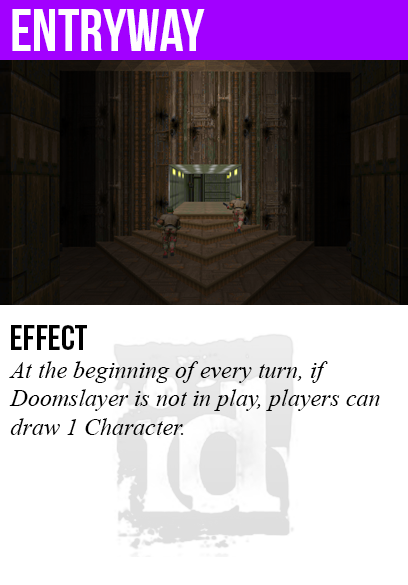
<style>
.page{position:relative;width:408px;height:585px;background:#ffffff}
.page>*{position:absolute;margin:0}
.t1{font:60px "BebasNeue";color:#ffffff}
.t2{font:36px "BebasNeue";color:#000000}
.t3{font:24px "TimesNewRomanPS-ItalicMT";color:#000000}
</style>
<div class="page">
<p class="t1" style="left:12px;top:9px;width:193px;height:42px">entryway</p>
<p class="t2" style="left:11px;top:325px;width:76px;height:25px">Effect</p>
<p class="t3" style="left:9px;top:361px;width:371px;height:74px">At the beginning of every turn, if<br>Doomslayer is not in play, players can<br>draw 1 Character.</p>
</div>
